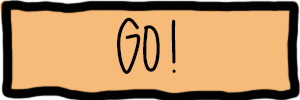
<style>
.page{position:relative;width:300px;height:100px;background:#f6ba79}
.page>*{position:absolute;margin:0}
.t1{font:72px "BlackTinBox";color:#000000}
</style>
<div class="page">
<p class="t1" style="left:117px;top:17px;width:59px;height:57px">go!</p>
</div>
